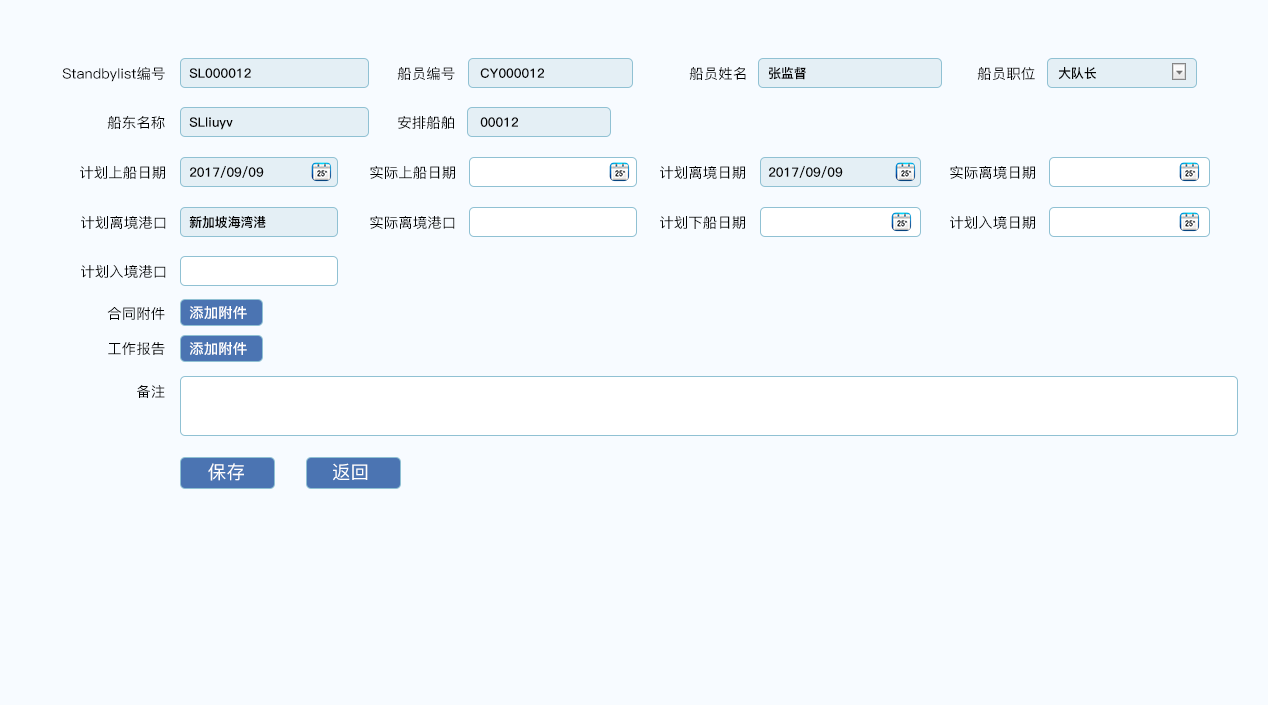
<style>
.page{position:relative;width:1268px;height:709px;background:#f7fbff}
.page>*{position:absolute;margin:0}
.t1{font:14px "PingFang-SC-Medium";color:#020202;scale:1.04 1}
.t2{font:13px "PingFang-SC-Heavy";color:#050505}
.t3{font:14px "PingFang-SC-Bold";color:#ffffff;scale:1.04 1}
.t4{font:18.6px "PingFang-SC-Medium";color:#ffffff}
</style>
<div class="page">
<p class="t1" style="left:62px;top:67px;width:103px;height:15px">Standbylist编号</p>
<p class="t2" style="left:189px;top:68px;width:62px;height:10px">SL000012</p>
<p class="t1" style="left:397px;top:67px;width:58px;height:13px">船员编号</p>
<p class="t2" style="left:480px;top:68px;width:64px;height:10px">CY000012</p>
<p class="t1" style="left:689px;top:67px;width:57px;height:13px">船员姓名</p>
<p class="t2" style="left:768px;top:67px;width:38px;height:13px">张监督</p>
<p class="t1" style="left:977px;top:67px;width:58px;height:13px">船员职位</p>
<p class="t2" style="left:1058px;top:67px;width:38px;height:13px">大队长</p>
<p class="t1" style="left:107px;top:116px;width:58px;height:13px">船东名称</p>
<p class="t2" style="left:189px;top:117px;width:44px;height:13px">SLliuyv</p>
<p class="t1" style="left:398px;top:116px;width:56px;height:13px">安排船舶</p>
<p class="t2" style="left:480px;top:117px;width:38px;height:10px">00012</p>
<p class="t1" style="left:80px;top:166px;width:85px;height:13px">计划上船日期</p>
<p class="t2" style="left:190px;top:166px;width:74px;height:12px">2017/09/09</p>
<p class="t1" style="left:370px;top:166px;width:85px;height:13px">实际上船日期</p>
<p class="t1" style="left:660px;top:166px;width:85px;height:13px">计划离境日期</p>
<p class="t2" style="left:769px;top:166px;width:74px;height:12px">2017/09/09</p>
<p class="t1" style="left:950px;top:166px;width:85px;height:13px">实际离境日期</p>
<p class="t1" style="left:81px;top:216px;width:85px;height:13px">计划离境港口</p>
<p class="t2" style="left:189px;top:216px;width:77px;height:13px">新加坡海湾港</p>
<p class="t1" style="left:370px;top:216px;width:85px;height:13px">实际离境港口</p>
<p class="t1" style="left:660px;top:216px;width:85px;height:13px">计划下船日期</p>
<p class="t1" style="left:950px;top:216px;width:85px;height:13px">计划入境日期</p>
<p class="t1" style="left:81px;top:265px;width:85px;height:13px">计划入境港口</p>
<p class="t1" style="left:107px;top:307px;width:58px;height:13px">合同附件</p>
<p class="t3" style="left:189px;top:306px;width:58px;height:13px">添加附件</p>
<p class="t1" style="left:108px;top:342px;width:57px;height:13px">工作报告</p>
<p class="t3" style="left:189px;top:342px;width:58px;height:13px">添加附件</p>
<p class="t1" style="left:137px;top:385px;width:28px;height:13px">备注</p>
<p class="t4" style="left:208px;top:463px;width:160px;height:18px">保存              返回</p>
</div>
